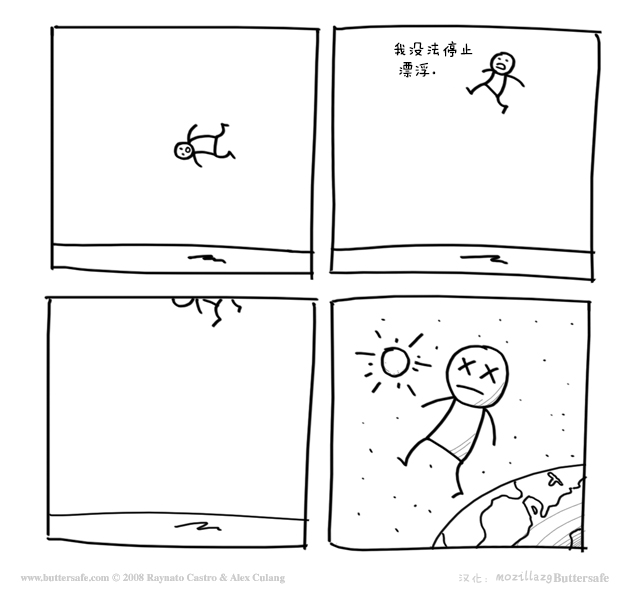
<style>
.page{position:relative;width:639px;height:590px;background:#ffffff}
.page>*{position:absolute;margin:0}
.t1{font:16.7px/20.8px "FZMWJW--GB1-0";color:#000000}
.t2{font:16.7px "FZMWJW--GB1-0";color:#cccccc}
.t3{font:12.5px "FZMWJW--GB1-0";color:#cccccc}
</style>
<div class="page">
<p class="t1" style="left:394px;top:41px;width:79px;height:37px">我没法停止<br> 漂浮。</p>
<p class="t2" style="left:459px;top:570px;width:93px;height:14px"><span class="t3">汉化：</span>mozillazg</p>
</div>
